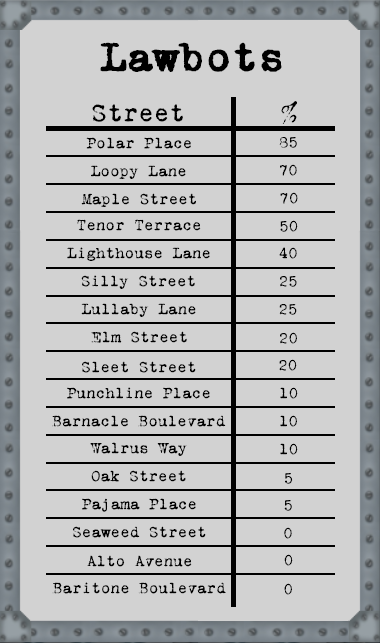
<style>
.page{position:relative;width:380px;height:643px;background:#d2d2d2}
.page>*{position:absolute;margin:0}
.t1{font:42px "VTPortableRemington";color:#000000;font-weight:bold}
.t2{font:26px "VTPortableRemington";color:#000000}
.t3{font:16px "VTPortableRemington";color:#000000}
</style>
<div class="page">
<p class="t1" style="left:100px;top:42px;width:182px;height:30px">Lawbots</p>
<p class="t2" style="left:281px;top:101px;width:16px;height:23px">%</p>
<p class="t2" style="left:92px;top:104px;width:91px;height:18px">Street</p>
<p class="t3" style="left:86px;top:137px;width:105px;height:12px">Polar Place</p>
<p class="t3" style="left:279px;top:137px;width:18px;height:11px">85</p>
<p class="t3" style="left:91px;top:165px;width:95px;height:14px">Loopy Lane</p>
<p class="t3" style="left:280px;top:164px;width:17px;height:12px">70</p>
<p class="t3" style="left:81px;top:193px;width:115px;height:14px">Maple Street</p>
<p class="t3" style="left:280px;top:192px;width:18px;height:12px">70</p>
<p class="t3" style="left:77px;top:219px;width:124px;height:12px">Tenor Terrace</p>
<p class="t3" style="left:280px;top:220px;width:18px;height:12px">50</p>
<p class="t3" style="left:67px;top:247px;width:143px;height:14px">Lighthouse Lane</p>
<p class="t3" style="left:279px;top:247px;width:18px;height:12px">40</p>
<p class="t3" style="left:81px;top:275px;width:114px;height:14px">Silly Street</p>
<p class="t3" style="left:280px;top:276px;width:17px;height:11px">25</p>
<p class="t3" style="left:81px;top:303px;width:115px;height:14px">Lullaby Lane</p>
<p class="t3" style="left:279px;top:304px;width:18px;height:11px">25</p>
<p class="t3" style="left:91px;top:331px;width:96px;height:12px">Elm Street</p>
<p class="t3" style="left:280px;top:332px;width:17px;height:12px">20</p>
<p class="t3" style="left:82px;top:361px;width:114px;height:12px">Sleet Street</p>
<p class="t3" style="left:279px;top:359px;width:18px;height:12px">20</p>
<p class="t3" style="left:67px;top:387px;width:143px;height:12px">Punchline Place</p>
<p class="t3" style="left:280px;top:387px;width:18px;height:12px">10</p>
<p class="t3" style="left:52px;top:415px;width:174px;height:12px">Barnacle Boulevard</p>
<p class="t3" style="left:280px;top:415px;width:17px;height:12px">10</p>
<p class="t3" style="left:90px;top:442px;width:97px;height:14px">Walrus Way</p>
<p class="t3" style="left:280px;top:443px;width:18px;height:12px">10</p>
<p class="t3" style="left:91px;top:470px;width:95px;height:12px">Oak Street</p>
<p class="t3" style="left:285px;top:473px;width:8px;height:11px">5</p>
<p class="t3" style="left:82px;top:498px;width:114px;height:14px">Pajama Place</p>
<p class="t3" style="left:284px;top:500px;width:8px;height:11px">5</p>
<p class="t3" style="left:73px;top:526px;width:133px;height:12px">Seaweed Street</p>
<p class="t3" style="left:284px;top:527px;width:8px;height:12px">0</p>
<p class="t3" style="left:87px;top:555px;width:105px;height:12px">Alto Avenue</p>
<p class="t3" style="left:284px;top:554px;width:9px;height:12px">0</p>
<p class="t3" style="left:52px;top:582px;width:174px;height:12px">Baritone Boulevard</p>
<p class="t3" style="left:284px;top:583px;width:8px;height:12px">0</p>
</div>
